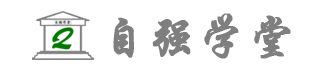
<style>
.page{position:relative;width:336px;height:69px;background:#ffffff}
.page>*{position:absolute;margin:0}
.t1{font:48px "STXingkai";color:#7f7f7f;font-weight:bold}
</style>
<div class="page">
<p class="t1" style="left:113px;top:13px;width:178px;height:46px">自强学堂</p>
</div>
